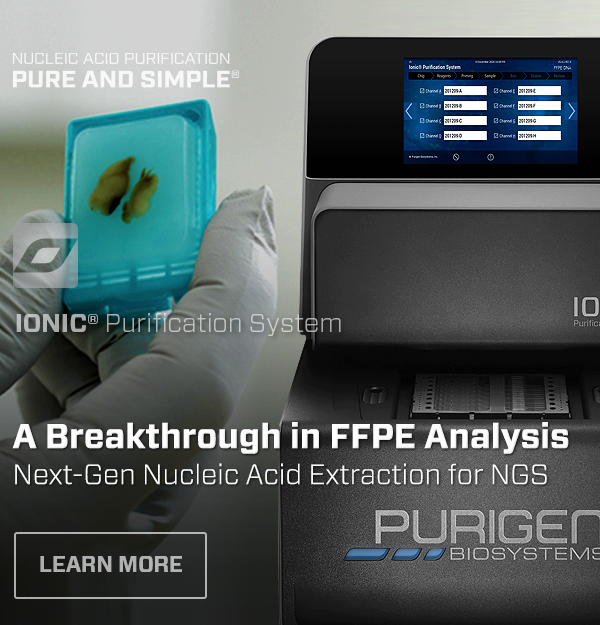
<style>
.page{position:relative;width:600px;height:625px}
.page>*{position:absolute;margin:0}
.t1{font:26px "Forza-Light";color:#b0b4b2}
.t2{font:26px "Forza-Bold";color:#b0b4b2;text-transform:uppercase}
.t3{font:28px/36px "Forza-Light";color:#ffffff}
.t4{font:34.3px/36px "Forza-Bold";color:#ffffff}
.t5{font:21.9px "Forza-Bold";letter-spacing:-0.01em;color:#b0b0af;text-transform:uppercase}
</style>
<div class="page">
<p class="t1" style="left:16px;top:313px;width:325px;height:23px"><span class="t2">Ionic® </span>Purification System</p>
<p class="t3" style="left:12px;top:422px;width:557px;height:63px"><span class="t4">A Breakthrough in FFPE Analysis<br></span>Next-Gen Nucleic Acid Extraction for NGS</p>
<p class="t5" style="left:40px;top:556px;width:142px;height:16px">Learn More</p>
</div>
